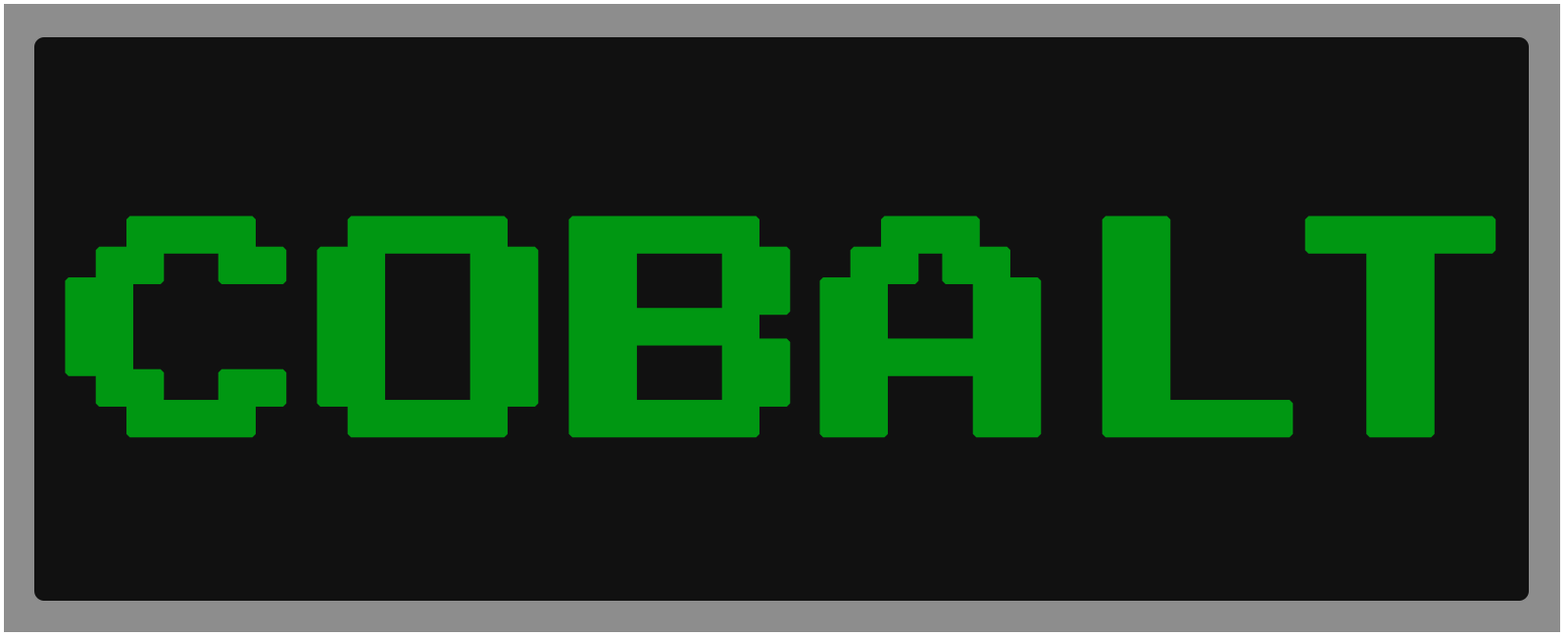
<style>
.page{position:relative;width:1568px;height:637px;background:#111111}
.page>*{position:absolute;margin:0}
.t1{font:245px "PressStart2P";color:#009712;font-weight:bold}
.t2{font:245px "PressStart2P";letter-spacing:-0.2em;color:#009712;font-weight:bold}
</style>
<div class="page">
<p class="t1" style="left:65px;top:216px;width:1431px;height:222px">COBA<span class="t2">LT</span></p>
</div>
